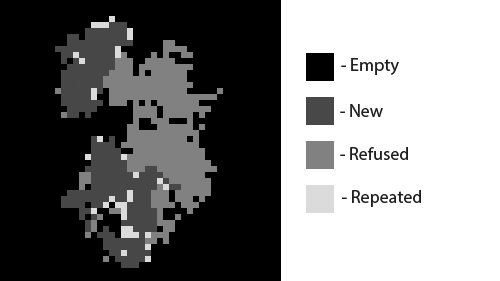
<style>
.page{position:relative;width:500px;height:281px;background:#000000}
.page>*{position:absolute;margin:0}
.t1{font:18px "MyriadPro-Regular";color:#202020}
</style>
<div class="page">
<p class="t1" style="left:341px;top:58px;width:58px;height:17px">- Empty</p>
<p class="t1" style="left:340px;top:104px;width:43px;height:13px">- New</p>
<p class="t1" style="left:340px;top:147px;width:68px;height:13px">- Refused</p>
<p class="t1" style="left:342px;top:190px;width:79px;height:17px">- Repeated</p>
</div>
